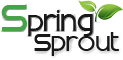
<style>
.page{position:relative;width:123px;height:60px;background:#ffffff}
.page>*{position:absolute;margin:0}
.t1{font:26px "Swatch"}
.t2{font:40px "Swatch"}
.t3{font:24px "Swatch";color:#191919}
.t4{font:26px "Swatch";color:#191919}
</style>
<div class="page">
<p class="t1" style="left:1px;top:5px;width:92px;height:31px"><span class="t2">s</span>pring</p>
<p class="t3" style="left:34px;top:32px;width:85px;height:24px"><span class="t4">s</span>prout</p>
</div>
